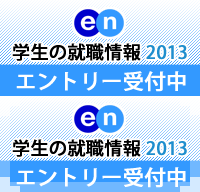
<style>
.page{position:relative;width:200px;height:192px;background:#ffffff}
.page>*{position:absolute;margin:0}
.t1{font:18px "KozGoPro-Medium";color:#000000;font-weight:bold}
.t2{font:18px "KozGoPro-Medium";color:#1e8ece;font-weight:bold}
.t3{font:21px "KozGoPro-Medium";color:#ffffff;font-weight:bold}
</style>
<div class="page">
<p class="t1" style="left:12px;top:43px;width:175px;height:18px">学生の就職情報 <span class="t2">2013</span></p>
<p class="t3" style="left:16px;top:71px;width:170px;height:21px">エントリー受付中</p>
<p class="t1" style="left:12px;top:139px;width:175px;height:18px">学生の就職情報 <span class="t2">2013</span></p>
<p class="t3" style="left:16px;top:167px;width:170px;height:21px">エントリー受付中</p>
</div>
